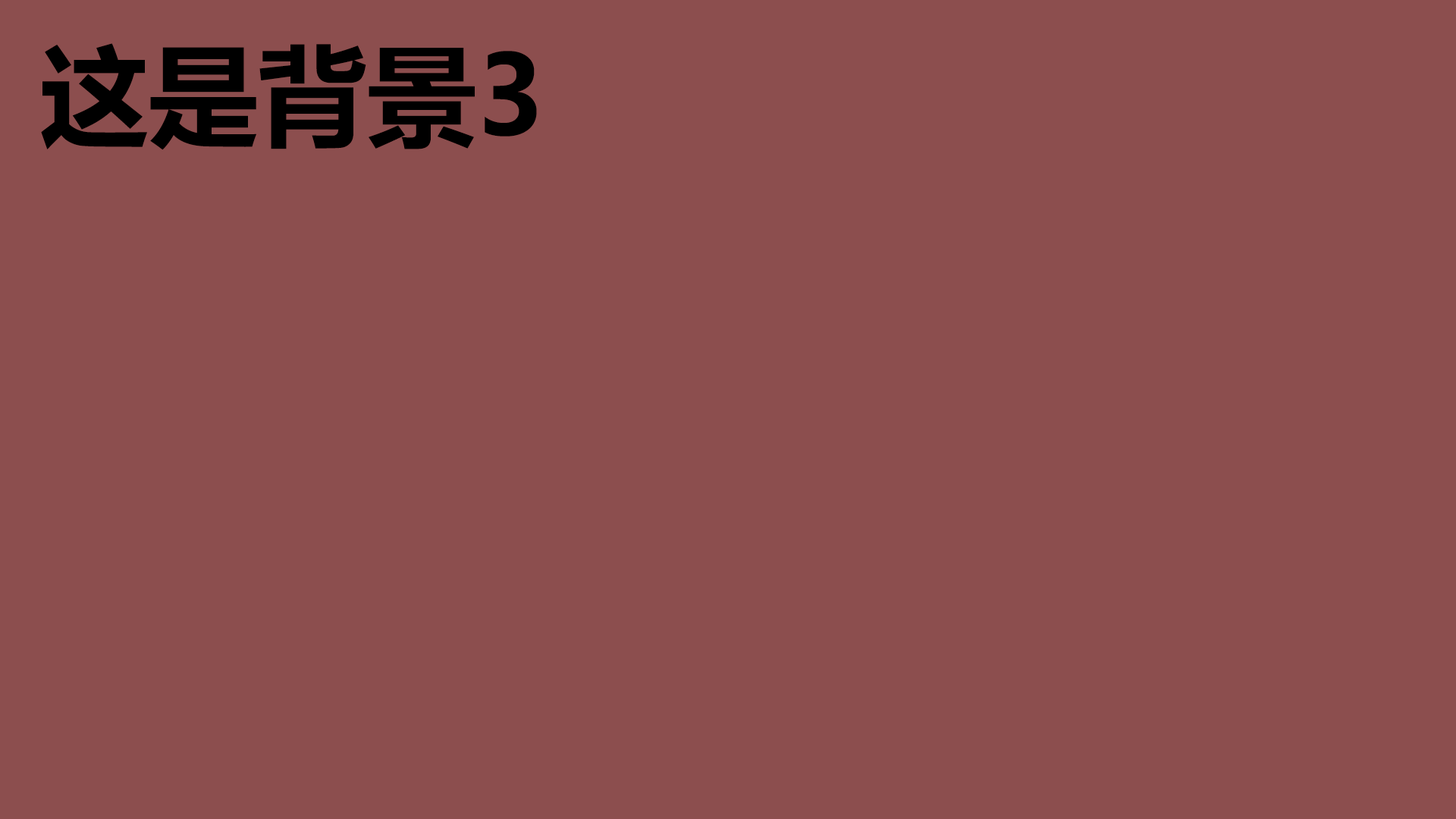
<style>
.page{position:relative;width:1456px;height:819px;background:#8c4e4e}
.page>*{position:absolute;margin:0}
.t1{font:109.2px "MicrosoftYaHei-Bold";color:#000000}
</style>
<div class="page">
<p class="t1" style="left:41px;top:43px;width:496px;height:107px">这是背景3</p>
</div>
